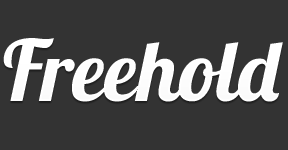
<style>
.page{position:relative;width:288px;height:150px;background:#333333}
.page>*{position:absolute;margin:0}
.t1{font:84px "Lobster";color:#ffffff}
</style>
<div class="page">
<p class="t1" style="left:3px;top:38px;width:280px;height:64px">Freehold</p>
</div>
